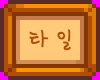
<style>
.page{position:relative;width:100px;height:80px}
.page>*{position:absolute;margin:0}
.t1{font:30px "SDMiSaeng";color:#b14e05}
</style>
<div class="page">
<p class="t1" style="left:29px;top:29px;width:42px;height:22px">타 일</p>
</div>
